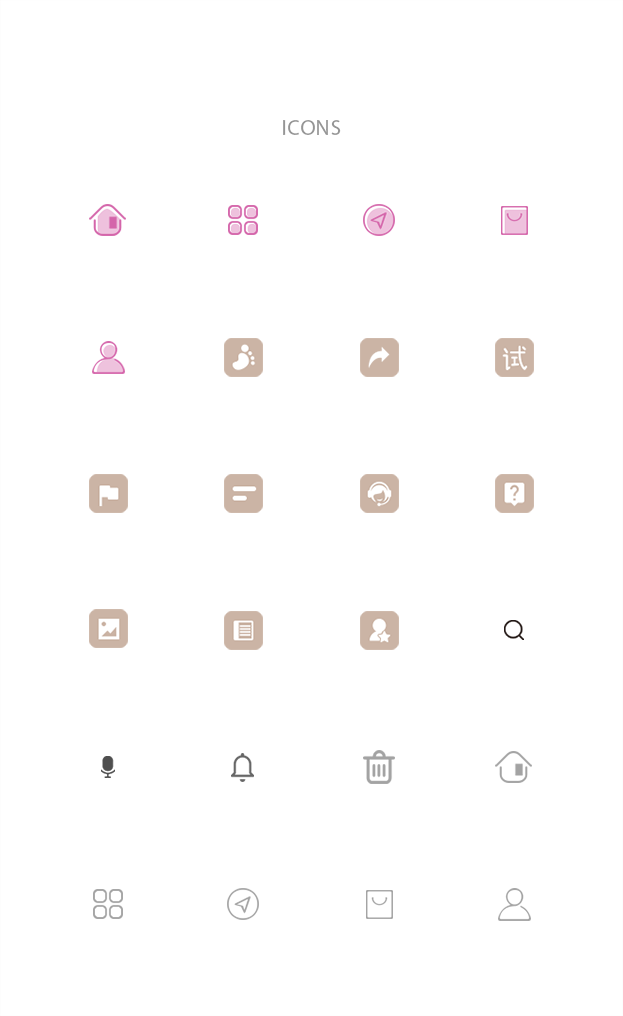
<style>
.page{position:relative;width:623px;height:1016px;background:#ffffff}
.page>*{position:absolute;margin:0}
.t1{font:21.1px "MyriadPro-Regular";letter-spacing:0.04em;color:#959595;text-transform:uppercase}
</style>
<div class="page">
<p class="t1" style="left:283px;top:120px;width:58px;height:15px">ICONS</p>
</div>
